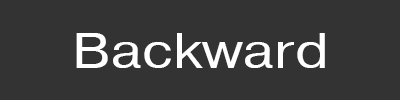
<style>
.page{position:relative;width:400px;height:100px;background:#333333}
.page>*{position:absolute;margin:0}
.t1{font:48px "Helvetica";color:#ffffff;scale:1.2 1}
</style>
<div class="page">
<p class="t1" style="left:76px;top:33px;width:249px;height:35px">Backward</p>
</div>
